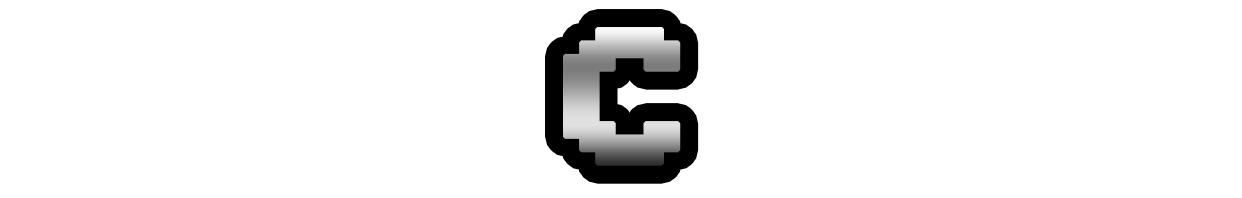
<style>
.page{position:relative;width:1242px;height:198px;background:#ffffff}
.page>*{position:absolute;margin:0}
.t1{font:215px "DOSIyagiMedium";letter-spacing:0.16em;font-weight:bold;scale:1.2 1}
</style>
<div class="page">
<p class="t1" style="left:563px;top:27px;width:118px;height:139px">C</p>
</div>
